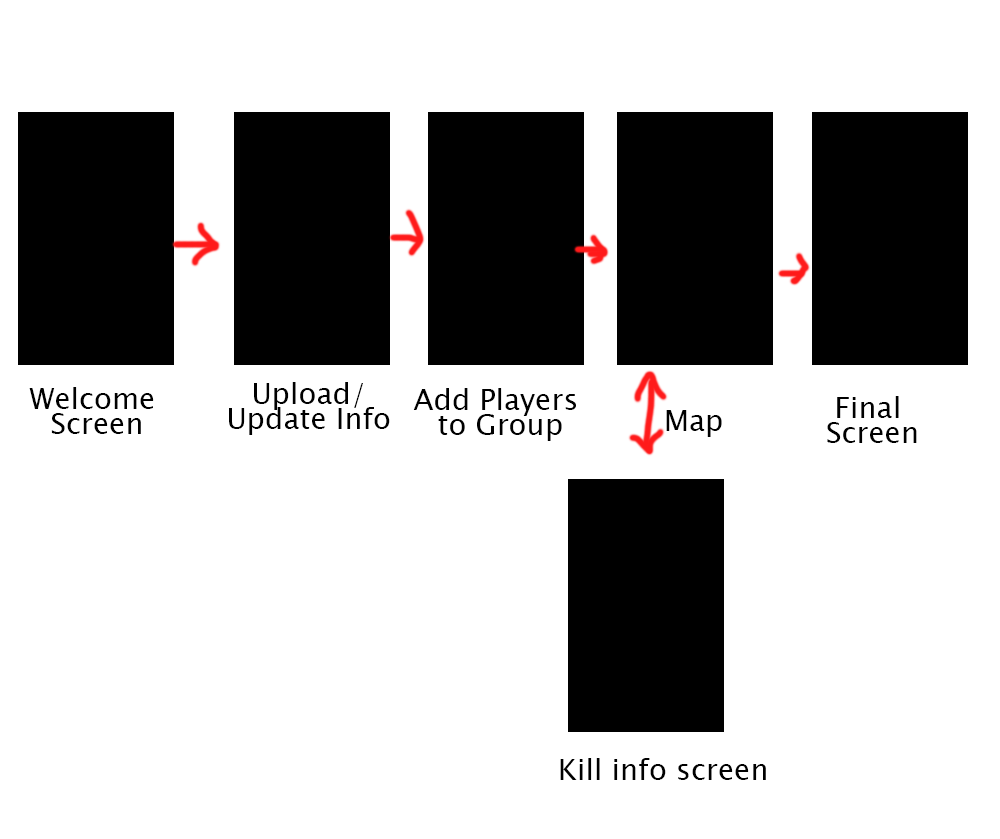
<style>
.page{position:relative;width:1000px;height:839px;background:#ffffff}
.page>*{position:absolute;margin:0}
.t1{font:29.2px/25px "LucidaSansUnicode";color:#000000}
.t2{font:29.2px "LucidaSansUnicode";color:#000000}
</style>
<div class="page">
<p class="t1" style="left:29px;top:387px;width:125px;height:47px;text-align:center">Welcome <br>Screen</p>
<p class="t1" style="left:229px;top:382px;width:161px;height:53px;text-align:center">Upload/<br>Update Info</p>
<p class="t1" style="left:413px;top:388px;width:163px;height:53px;text-align:center">Add Players<br> to Group</p>
<p class="t1" style="left:827px;top:396px;width:90px;height:47px;text-align:center">Final <br>Screen</p>
<p class="t2" style="left:666px;top:410px;width:56px;height:27px">Map</p>
<p class="t2" style="left:560px;top:758px;width:206px;height:22px">Kill info screen</p>
</div>
